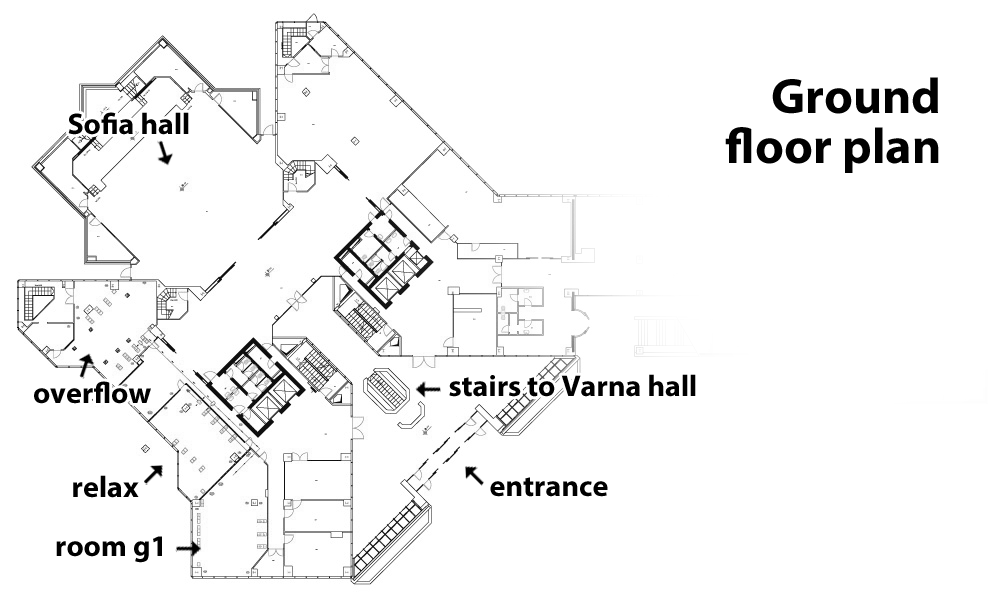
<style>
.page{position:relative;width:1007px;height:596px;background:#ffffff}
.page>*{position:absolute;margin:0}
.t1{font:50px/50px "MyriadPro-Bold";color:#000000}
.t2{font:30px "MyriadPro-Bold";color:#000000}
</style>
<div class="page">
<p class="t1" style="left:725px;top:77px;width:214px;height:96px;text-align:right">Ground<br>floor plan</p>
<p class="t2" style="left:68px;top:112px;width:121px;height:23px">Sofia hall</p>
<p class="t2" style="left:449px;top:374px;width:247px;height:23px">stairs to Varna hall</p>
<p class="t2" style="left:34px;top:381px;width:117px;height:23px">overflow</p>
<p class="t2" style="left:73px;top:475px;width:66px;height:23px">relax</p>
<p class="t2" style="left:490px;top:477px;width:118px;height:20px">entrance</p>
<p class="t2" style="left:56px;top:536px;width:106px;height:27px">room g1</p>
</div>
